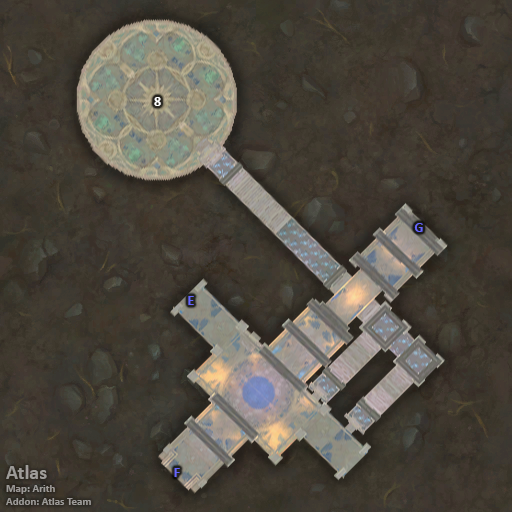
<style>
.page{position:relative;width:512px;height:512px}
.page>*{position:absolute;margin:0}
.t1{font:14px "Calibri-Bold";color:#ffffff}
.t2{font:14px "Calibri-Bold";color:#6666ff}
.t3{font:11px "Calibri-Bold";color:#9d9b98}
.t4{font:20px "Calibri-Bold";color:#9d9b98}
</style>
<div class="page">
<p class="t1" style="left:154px;top:97px;width:7px;height:9px">8</p>
<p class="t2" style="left:414px;top:223px;width:9px;height:9px">G</p>
<p class="t2" style="left:188px;top:296px;width:6px;height:9px">E</p>
<p class="t3" style="left:6px;top:465px;width:85px;height:40px"><span class="t4">Atlas<br></span>Map: Arith<br>Addon: Atlas Team</p>
<p class="t2" style="left:174px;top:468px;width:6px;height:9px">F</p>
</div>
